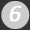
<style>
.page{position:relative;width:30px;height:30px;background:#cccccc}
.page>*{position:absolute;margin:0}
.t1{font:24px "Calibri";color:#ffffff;font-weight:bold;font-style:italic}
</style>
<div class="page">
<p class="t1" style="left:9px;top:5px;width:13px;height:17px">6</p>
</div>
